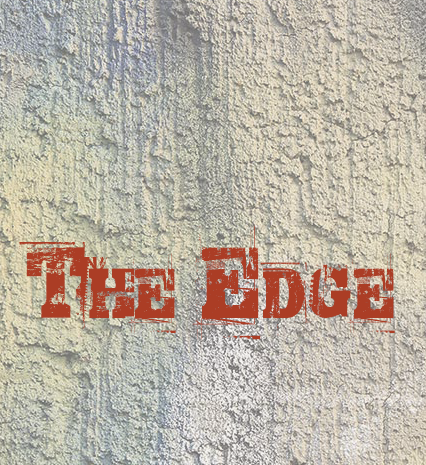
<style>
.page{position:relative;width:426px;height:465px}
.page>*{position:absolute;margin:0}
.t1{font:72px "TRASHED";letter-spacing:0.05em;color:#ab3d25;font-variant:small-caps}
</style>
<div class="page">
<p class="t1" style="left:19px;top:226px;width:376px;height:114px">The Edge</p>
</div>
